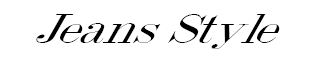
<style>
.page{position:relative;width:310px;height:60px;background:#ffffff}
.page>*{position:absolute;margin:0}
.t1{font:51.5px "DubielPlain";color:#000000;scale:1.18 1}
</style>
<div class="page">
<p class="t1" style="left:36px;top:14px;width:244px;height:35px">Jeans Style</p>
</div>
